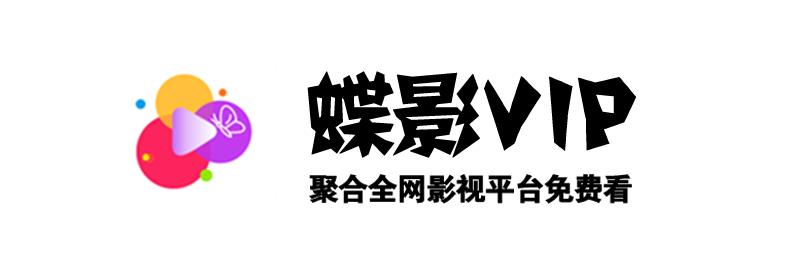
<style>
.page{position:relative;width:795px;height:256px;background:#ffffff}
.page>*{position:absolute;margin:0}
.t1{font:90px "FZJZJW--GB1-0";letter-spacing:-0.075em;color:#000000;font-weight:bold}
.t2{font:30.9px "FZDHTK--GBK1-0";letter-spacing:-0.075em;color:#000000;font-weight:bold}
</style>
<div class="page">
<p class="t1" style="left:307px;top:71px;width:329px;height:87px">蝶影VIP</p>
<p class="t2" style="left:309px;top:174px;width:323px;height:30px">聚合全网影视平台免费看</p>
</div>
